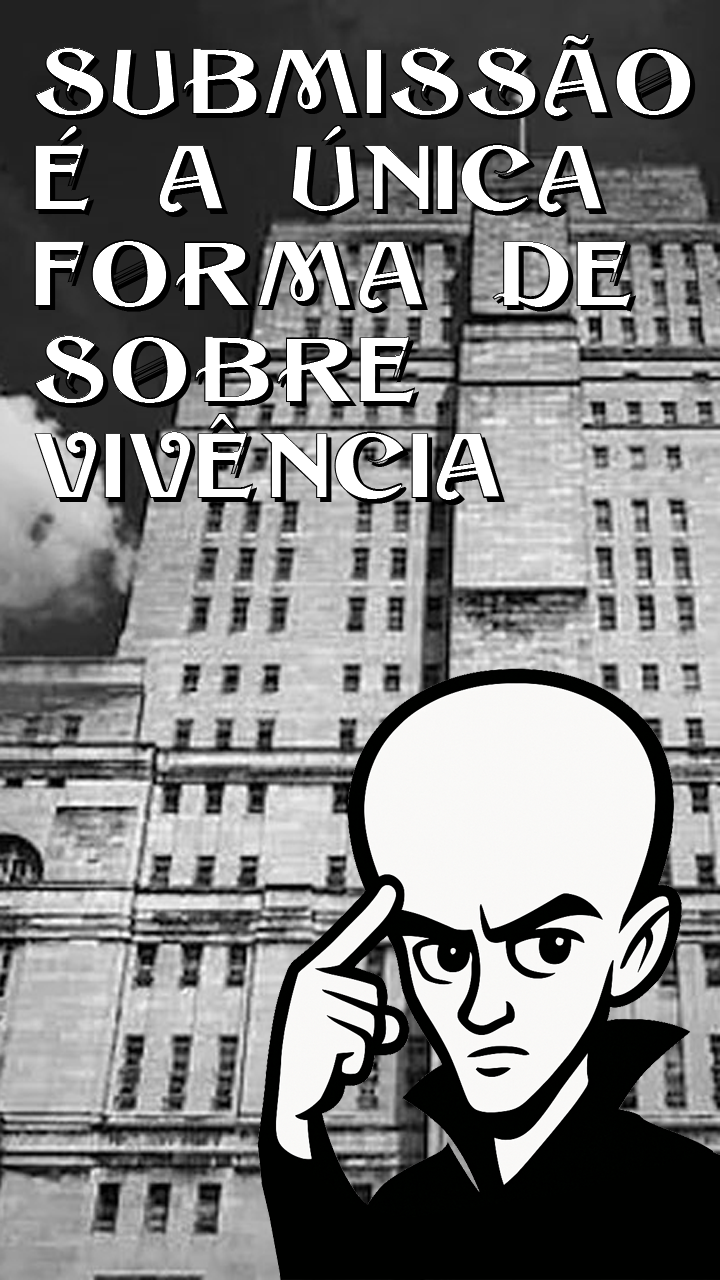
<style>
.page{position:relative;width:720px;height:1280px}
.page>*{position:absolute;margin:0}
.t1{font:80px "Sesame-Shadow";color:#000000}
</style>
<div class="page">
<p class="t1" style="left:34px;top:34px;width:662px;height:471px">SUBMISSÃO <br>É A ÚNICA <br>FORMA DE<br>SOBRE<br>VIVÊNCIA</p>
</div>
